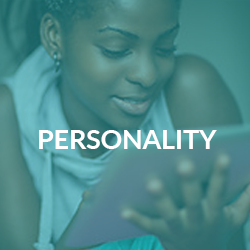
<style>
.page{position:relative;width:250px;height:250px}
.page>*{position:absolute;margin:0}
.t1{font:26.7px "Lato-Bold";color:#ffffff}
</style>
<div class="page">
<p class="t1" style="left:39px;top:130px;width:178px;height:19px">PERSONALITY</p>
</div>
